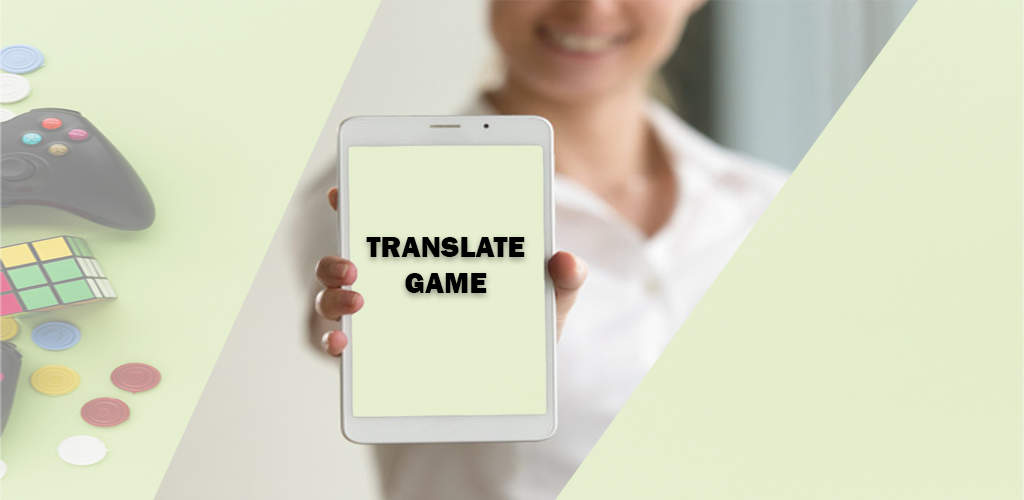
<style>
.page{position:relative;width:1024px;height:500px}
.page>*{position:absolute;margin:0}
.t1{font:30px "FranklinGothic-Heavy";color:#000000}
</style>
<div class="page">
<p class="t1" style="left:366px;top:237px;width:159px;height:56px;text-align:center">TRANSLATE<br>GAME</p>
</div>
